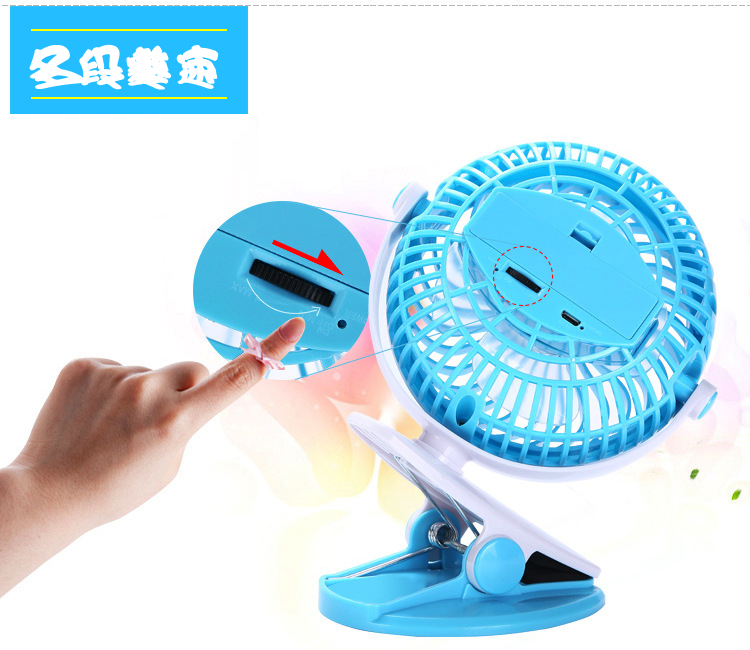
<style>
.page{position:relative;width:750px;height:650px;background:#ffffff}
.page>*{position:absolute;margin:0}
.t1{font:48px "HanWangCC02";letter-spacing:-0.01em;color:#ffffff;font-weight:bold}
</style>
<div class="page">
<p class="t1" style="left:29px;top:44px;width:190px;height:46px">多段變速</p>
</div>
